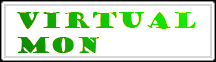
<style>
.page{position:relative;width:216px;height:62px;background:#ffffff}
.page>*{position:absolute;margin:0}
.t1{font:20.8px "GoudyStout"}
</style>
<div class="page">
<p class="t1" style="left:17px;top:12px;width:179px;height:41px">Virtual<br>Mon</p>
<p class="t1" style="left:17px;top:12px;width:179px;height:41px">Virtual<br>Mon</p>
</div>
